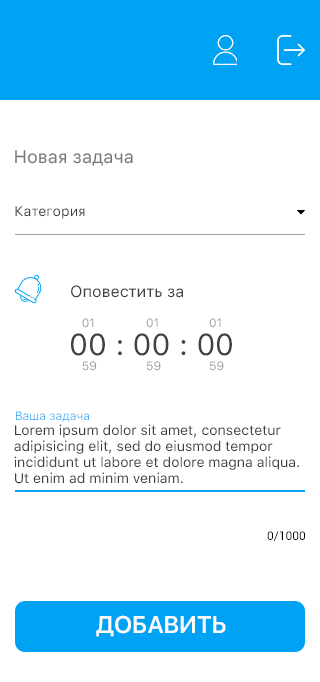
<style>
.page{position:relative;width:320px;height:682px;background:#ffffff}
.page>*{position:absolute;margin:0}
.t1{font:18px "SFUIText-Regular";color:#767676}
.t2{font:14px "SFUIText-Regular";color:#404040}
.t3{font:16px "SFUIText-Regular";color:#404040}
.t4{font:12px "SFUIText-Regular";color:#9f9f9f}
.t5{font:30px "SFUIText-Regular";color:#404040}
.t6{font:12px "SFUIText-Light"}
.t7{font:14px/16px "SFUIText-Regular";color:#404040}
.t8{font:12px "Roboto-Regular";color:#000000}
.t9{font:24px "SFUIDisplay-Semibold";color:#fafafa}
</style>
<div class="page">
<p class="t1" style="left:15px;top:150px;width:118px;height:16px">Новая задача</p>
<p class="t2" style="left:15px;top:206px;width:70px;height:13px">Категория</p>
<p class="t3" style="left:71px;top:285px;width:112px;height:13px">Оповестить за</p>
<p class="t4" style="left:82px;top:318px;width:12px;height:10px">01</p>
<p class="t4" style="left:146px;top:318px;width:12px;height:10px">01</p>
<p class="t4" style="left:209px;top:318px;width:12px;height:10px">01</p>
<p class="t5" style="left:71px;top:333px;width:161px;height:23px">00 : 00 : 00</p>
<p class="t4" style="left:82px;top:361px;width:15px;height:10px">59</p>
<p class="t4" style="left:147px;top:361px;width:14px;height:10px">59</p>
<p class="t4" style="left:210px;top:361px;width:14px;height:10px">59</p>
<p class="t6" style="left:16px;top:411px;width:73px;height:11px">Ваша задача</p>
<p class="t7" style="left:14px;top:424px;width:285px;height:60px">Lorem ipsum dolor sit amet, consectetur <br>adipisicing elit, sed do eiusmod tempor <br>incididunt ut labore et dolore magna aliqua. <br>Ut enim ad minim veniam.</p>
<p class="t8" style="left:267px;top:531px;width:38px;height:10px">0/1000</p>
<p class="t9" style="left:96px;top:615px;width:130px;height:22px">ДОБАВИТЬ</p>
</div>
